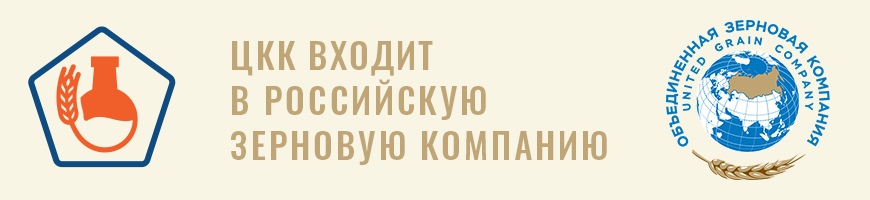
<style>
.page{position:relative;width:870px;height:200px;background:#f8f5e5}
.page>*{position:absolute;margin:0}
.t1{font:35px/45px "Oswald-Medium";letter-spacing:0.08em;color:#c0a577;text-transform:uppercase}
.t2{font:35px/45px "Oswald-Medium";letter-spacing:0.06em;color:#c0a577}
.t3{font:35px/45px "Oswald-Medium";letter-spacing:0.06em;color:#c0a577;text-transform:uppercase}
</style>
<div class="page">
<p class="t1" style="left:231px;top:41px;width:376px;height:124px"><span class="t2">ЦКК </span><span class="t3">входит <br></span>в Российскую <br>зерновую компанию</p>
</div>
